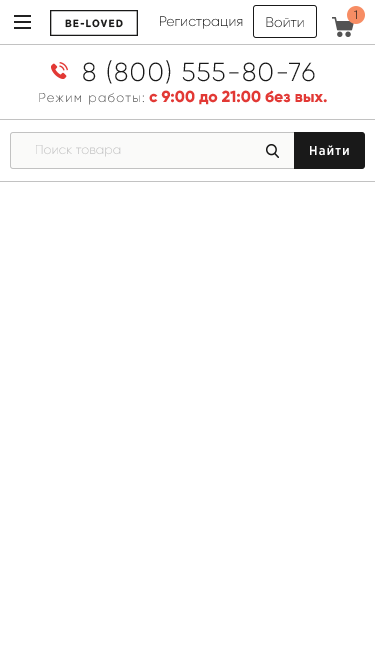
<style>
.page{position:relative;width:375px;height:667px;background:#ffffff}
.page>*{position:absolute;margin:0}
.t1{font:14px "Gilroy-Light"}
.t2{font:14px "Gilroy-Light";color:#191919}
.t3{font:12px "Gilroy-Light";letter-spacing:0.05em}
.t4{font:26px "Gilroy-Light";letter-spacing:0.05em;color:#191919}
.t5{font:13px "Gilroy-Light";letter-spacing:0.1em;color:#535353}
.t6{font:16px "Gilroy-ExtraBold";color:#e23935}
.t7{font:13px "Gilroy-Light";color:#c2c2c2}
.t8{font:13px "GothamProNarrow-Medium";letter-spacing:0.1em;color:#ffffff}
</style>
<div class="page">
<p class="t1" style="left:160px;top:16px;width:83px;height:13px">Регистрация</p>
<p class="t2" style="left:266px;top:17px;width:38px;height:11px">Войти</p>
<p class="t3" style="left:354px;top:10px;width:3px;height:9px">1</p>
<p class="t4" style="left:83px;top:60px;width:232px;height:24px">8 (800) 555-80-76</p>
<p class="t5" style="left:39px;top:92px;width:105px;height:13px">Режим работы:</p>
<p class="t6" style="left:149px;top:90px;width:178px;height:15px">c 9:00 до 21:00 без вых.</p>
<p class="t7" style="left:36px;top:145px;width:85px;height:12px">Поиск товара</p>
<p class="t8" style="left:310px;top:145px;width:39px;height:11px">Найти</p>
</div>
